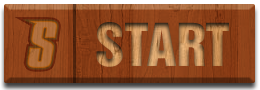
<style>
.page{position:relative;width:260px;height:90px}
.page>*{position:absolute;margin:0}
.t1{font:54px "HelveticaInseratLTStd-Roman"}
</style>
<div class="page">
<p class="t1" style="left:96px;top:22px;width:133px;height:45px">START</p>
</div>
